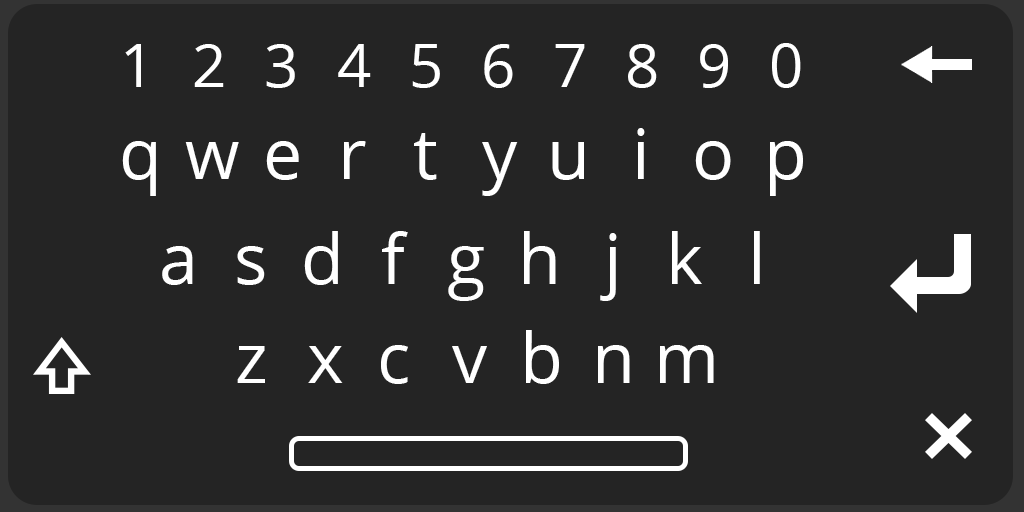
<style>
.page{position:relative;width:1024px;height:512px;background:#242424}
.page>*{position:absolute;margin:0}
.t1{font:60px "OpenSans-Regular";letter-spacing:0.63em;color:#ffffff}
.t2{font:70px "OpenSans-Regular";letter-spacing:0.35em;color:#ffffff}
.t3{font:70px "OpenSans-Regular";letter-spacing:0.555em;color:#ffffff}
.t4{font:70px "OpenSans-Regular";letter-spacing:0.475em;color:#ffffff}
</style>
<div class="page">
<p class="t1" style="left:125px;top:43px;width:676px;height:45px">1234567890</p>
<p class="t2" style="left:122px;top:128px;width:681px;height:68px">qwertyuiop</p>
<p class="t3" style="left:162px;top:231px;width:598px;height:70px">asdfghjkl</p>
<p class="t4" style="left:237px;top:330px;width:477px;height:54px">zxcvbnm</p>
</div>
